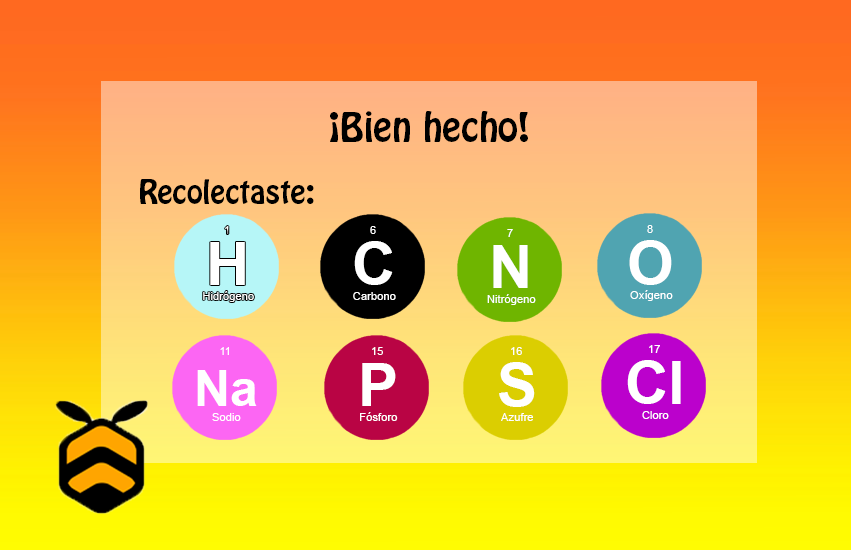
<style>
.page{position:relative;width:851px;height:550px}
.page>*{position:absolute;margin:0}
.t1{font:36px "HoboStd";color:#000000}
.t2{font:29px "HoboStd";color:#000000}
.t3{font:11.2px "ArialMT"}
.t4{font:11.2px "ArialMT";color:#ffffff}
.t5{font:60px "Arial-BoldMT";color:#ffffff}
.t6{font:50px "Arial-BoldMT";color:#ffffff}
</style>
<div class="page">
<p class="t1" style="left:330px;top:111px;width:198px;height:31px">¡Bien hecho!</p>
<p class="t2" style="left:140px;top:179px;width:174px;height:25px">Recolectaste:</p>
<p class="t3" style="left:225px;top:226px;width:4px;height:8px">1</p>
<p class="t4" style="left:370px;top:226px;width:6px;height:8px">6</p>
<p class="t4" style="left:507px;top:229px;width:6px;height:8px">7</p>
<p class="t4" style="left:647px;top:225px;width:6px;height:8px">8</p>
<p class="t5" style="left:210px;top:242px;width:35px;height:43px">H</p>
<p class="t5" style="left:354px;top:241px;width:39px;height:44px">C</p>
<p class="t5" style="left:493px;top:245px;width:35px;height:43px">N</p>
<p class="t5" style="left:629px;top:240px;width:43px;height:45px">O</p>
<p class="t4" style="left:203px;top:291px;width:51px;height:11px">Hidrógeno</p>
<p class="t4" style="left:353px;top:292px;width:43px;height:8px">Carbono</p>
<p class="t4" style="left:487px;top:294px;width:49px;height:11px">Nitrógeno</p>
<p class="t4" style="left:630px;top:290px;width:43px;height:11px">Oxígeno</p>
<p class="t4" style="left:220px;top:347px;width:9px;height:8px">11</p>
<p class="t4" style="left:372px;top:347px;width:11px;height:8px">15</p>
<p class="t4" style="left:511px;top:347px;width:11px;height:8px">16</p>
<p class="t4" style="left:649px;top:345px;width:11px;height:8px">17</p>
<p class="t5" style="left:362px;top:363px;width:34px;height:43px">P</p>
<p class="t5" style="left:499px;top:362px;width:36px;height:45px">S</p>
<p class="t5" style="left:627px;top:360px;width:54px;height:44px">Cl</p>
<p class="t6" style="left:197px;top:370px;width:60px;height:36px">Na</p>
<p class="t4" style="left:212px;top:413px;width:29px;height:8px">Sodio</p>
<p class="t4" style="left:360px;top:412px;width:38px;height:9px">Fósforo</p>
<p class="t4" style="left:501px;top:413px;width:32px;height:8px">Azufre</p>
<p class="t4" style="left:642px;top:411px;width:27px;height:8px">Cloro</p>
</div>
